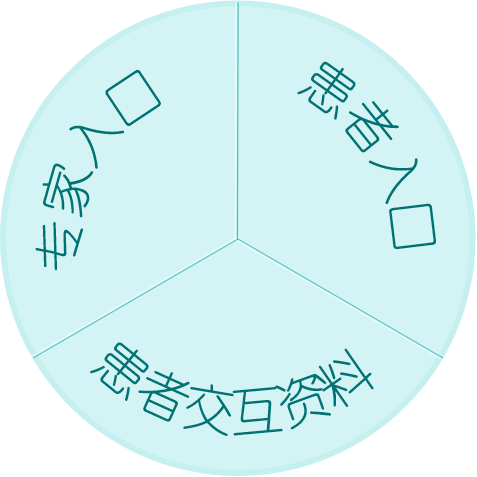
<style>
.page{position:relative;width:477px;height:477px;background:#d3f3f4}
.page>*{position:absolute;margin:0}
.t1{font:52px "YouYuan";letter-spacing:-0.025em;color:#007274}
.t2{font:52px "YouYuan";color:#007274}
</style>
<div class="page">
<p class="t1" style="left:297px;top:61px;width:139px;height:188px;rotate:-105deg">患者入口</p>
<p class="t2" style="left:35px;top:69px;width:126px;height:202px;rotate:-69deg">专家入口</p>
<p class="t2" style="left:90px;top:342px;width:284px;height:94px;rotate:-4deg">患者交互资料</p>
</div>
